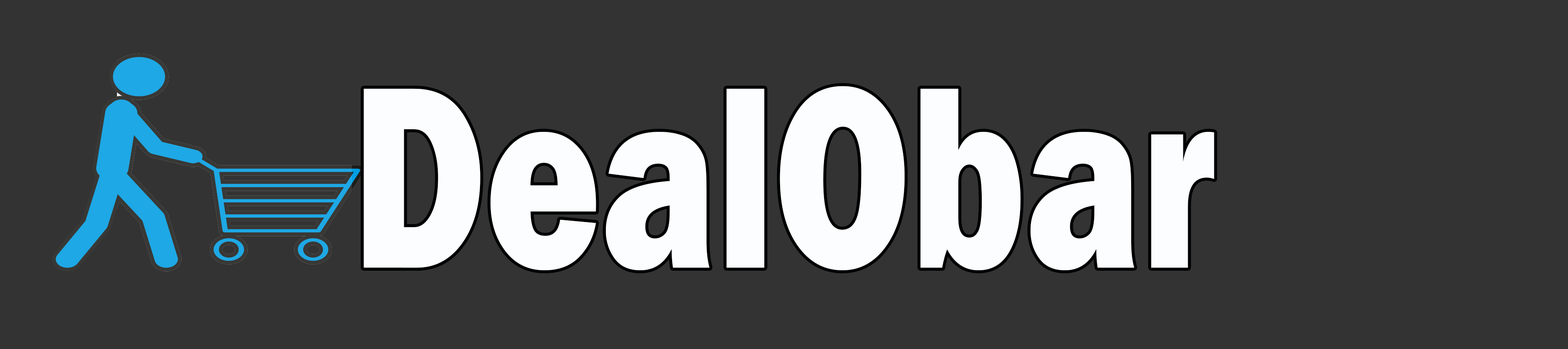
<style>
.page{position:relative;width:1568px;height:349px;background:#333333}
.page>*{position:absolute;margin:0}
.t1{font:268.1px "FranklinGothic-Heavy";color:#fbfdfe;scale:0.73 1}
</style>
<div class="page">
<p class="t1" style="left:364px;top:86px;width:850px;height:184px">DealObar</p>
</div>
